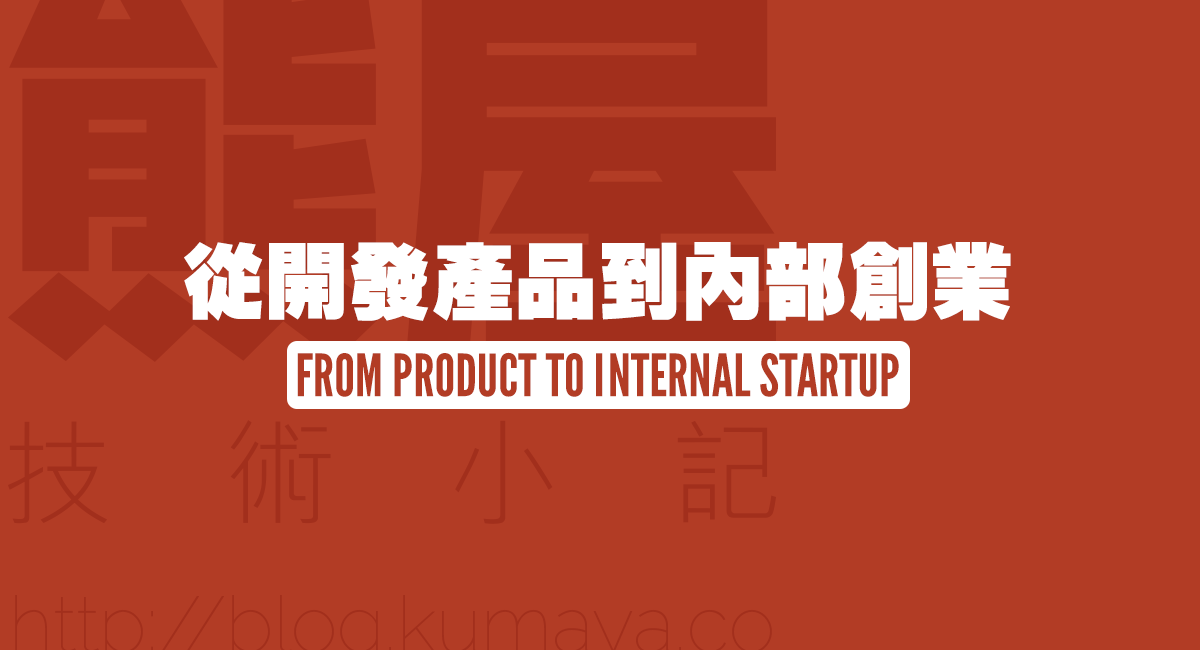
<style>
.page{position:relative;width:1200px;height:650px;background:#b23c25}
.page>*{position:absolute;margin:0}
.t1{font:58.3px/83.3px "LeagueGothic-Regular";color:#b23c25;text-transform:uppercase}
.t2{font:83.3px "CHeiHK-UltraBold";color:#ffffff}
</style>
<div class="page">
<p class="t1" style="left:184px;top:241px;width:827px;height:156px;text-align:center"><span class="t2">從開發產品到內部創業<br></span>From Product to Internal Startup</p>
</div>
